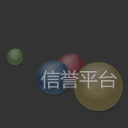
<style>
.page{position:relative;width:128px;height:128px;background:#333333}
.page>*{position:absolute;margin:0}
.t1{font:19px "MicrosoftYaHei";color:#9f9f9d}
</style>
<div class="page">
<p class="t1" style="left:41px;top:70px;width:76px;height:19px">信誉平台</p>
</div>
